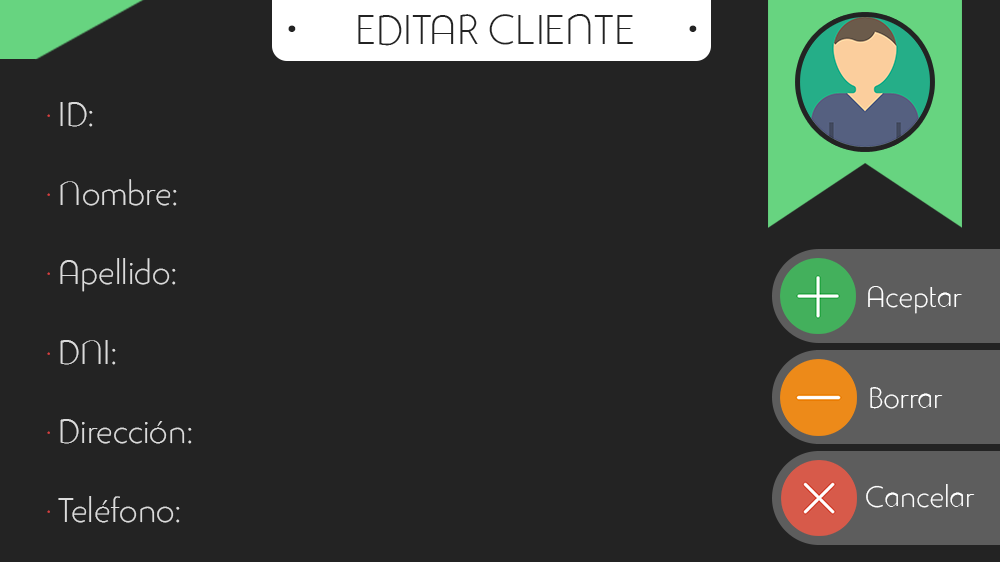
<style>
.page{position:relative;width:1000px;height:562px;background:#232323}
.page>*{position:absolute;margin:0}
.t1{font:41px "StudioGothicAlternateTrial-Extr";color:#232323}
.t2{font:97px "StudioGothicAlternateTrial-Extr";color:#232323}
.t3{font:33px "StudioGothicAlternateTrial-Extr";color:#dbdbdb}
.t4{font:33px "StudioGothicAlternateTrial-Extr";color:#d63f3f}
.t5{font:29px "StudioGothicAlternateTrial-Extr";color:#ffffff}
</style>
<div class="page">
<p class="t1" style="left:358px;top:14px;width:275px;height:32px">EDITAR CLIENTE</p>
<p class="t2" style="left:288px;top:25px;width:409px;height:7px">·                 ·</p>
<p class="t3" style="left:47px;top:102px;width:145px;height:421px"><span class="t4">· </span>ID:<br><span class="t4"><br>· </span>Nombre:<br><br><span class="t4">· </span>Apellido:<br><br><span class="t4">· </span>DNI:<br><span class="t4"><br>· </span>Dirección:<br><br><span class="t4">· </span>Teléfono:</p>
<p class="t5" style="left:868px;top:286px;width:94px;height:28px">Aceptar</p>
<p class="t5" style="left:870px;top:387px;width:73px;height:22px">Borrar</p>
<p class="t5" style="left:866px;top:484px;width:109px;height:24px">Cancelar</p>
</div>
